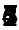
<style>
.page{position:relative;width:19px;height:30px;background:#ffffff}
.page>*{position:absolute;margin:0}
.t1{font:31.5px "MyriadPro-Regular";color:#000000}
</style>
<div class="page">
<p class="t1" style="left:2px;top:5px;width:16px;height:21px">4</p>
</div>
